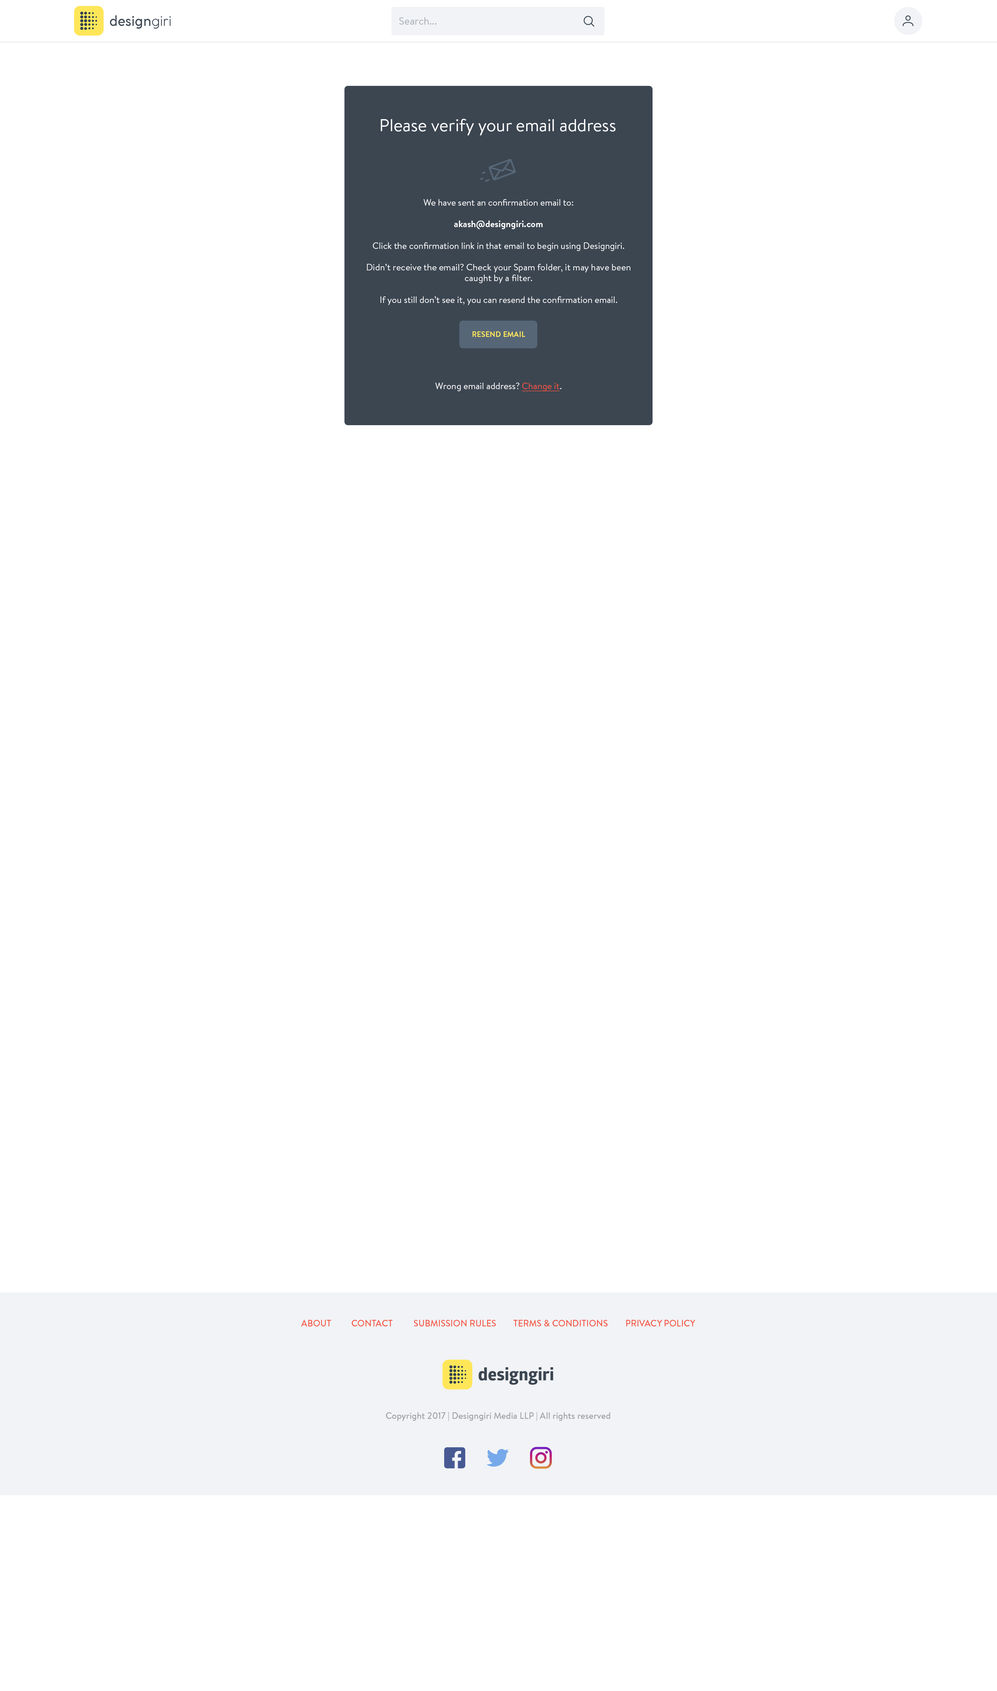
<style>
.page{position:relative;width:997px;height:1691px;background:#ffffff}
.page>*{position:absolute;margin:0}
.t1{font:10.4px "BrandonText-Regular";color:#a6aab0}
.t2{font:17.3px "BrandonText-Regular";color:#ffffff}
.t3{font:9px "BrandonText-Regular";color:#ffffff}
.t4{font:9px "BrandonText-Bold";color:#ffffff}
.t5{font:9px "BrandonText-Regular";color:#f55443;text-decoration:underline}
.t6{font:7.6px "BrandonText-Bold";color:#ffe659;text-transform:uppercase}
.t7{font:9px "BrandonText-Medium";color:#f55443;text-transform:uppercase}
.t8{font:9px "BrandonText-Medium";color:#9fa0a2}
</style>
<div class="page">
<p class="t1" style="left:399px;top:17px;width:37px;height:8px">Search...</p>
<p class="t2" style="left:381px;top:119px;width:234px;height:16px">Please verify your email address</p>
<p class="t3" style="left:367px;top:199px;width:263px;height:192px;text-align:center">We have sent an confirmation email to:<br><br><span class="t4">akash@designgiri.com<br></span><br>Click the confirmation link in that email to begin using Designgiri.<br><br>Didn’t receive the email? Check your Spam folder, it may have been caught by a filter. <br><br>If you still don’t see it, you can resend the confirmation email.<br><br><br><br><br><br><br><br>Wrong email address? <span class="t5">Change it</span>.</p>
<p class="t6" style="left:472px;top:331px;width:53px;height:6px">Resend email</p>
<p class="t7" style="left:301px;top:1320px;width:394px;height:6px">About  Contact  Submission Rules  Terms &amp; Conditions  Privacy Policy</p>
<p class="t8" style="left:386px;top:1412px;width:224px;height:9px">Copyright 2017 | Designgiri Media LLP | All rights reserved</p>
</div>
